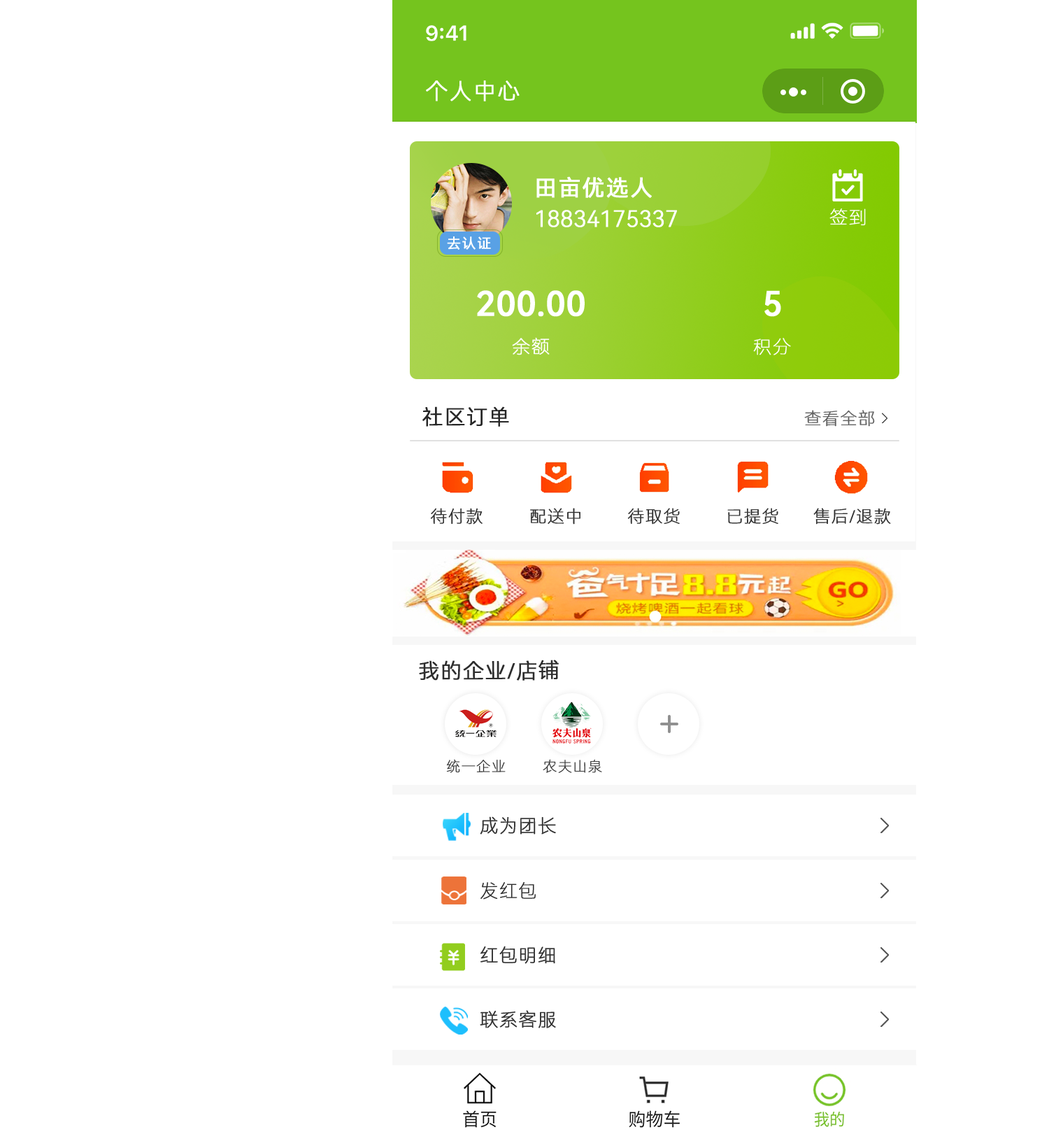
<style>
.page{position:relative;width:1049px;height:1136px;background:#ffffff}
.page>*{position:absolute;margin:0}
.t1{font:22.4px "HarmonyOS_Sans_SC_Light";letter-spacing:0.04em;color:#ffffff;text-transform:uppercase;font-weight:bold}
.t2{font:22.3px "HarmonyOS_Sans_SC";letter-spacing:0.04em;color:#ffffff;text-transform:uppercase;font-weight:bold}
.t3{font:22.3px "HarmonyOS_Sans_Light";color:#ffffff;text-transform:uppercase;font-weight:bold}
.t4{font:18.2px "HarmonyOS_Sans_SC_Thin";letter-spacing:0.04em;color:#ffffff;text-transform:uppercase;font-weight:bold}
.t5{font:14px "HarmonyOS_Sans_SC";letter-spacing:0.04em;color:#ffffff;text-transform:uppercase;font-weight:bold}
.t6{font:33.6px "HarmonyOS_Sans_Medium";color:#ffffff;text-transform:uppercase;font-weight:bold}
.t7{font:21px "HarmonyOS_Sans_SC_Light";letter-spacing:0.025em;color:#272727;text-transform:uppercase;font-weight:bold}
.t8{font:16.8px "HarmonyOS_Sans_SC_Thin";letter-spacing:0.025em;color:#5f5f5f;text-transform:uppercase;font-weight:bold}
.t9{font:16.8px "HarmonyOS_Sans_SC_Thin";letter-spacing:0.025em;color:#2d2d2d;text-transform:uppercase;font-weight:bold}
.t10{font:21px "HarmonyOS_Sans_SC_Light";letter-spacing:0.025em;color:#2d2d2d;text-transform:uppercase;font-weight:bold}
.t11{font:14px "HarmonyOS_Sans_SC_Thin";letter-spacing:0.025em;color:#2d2d2d;text-transform:uppercase;font-weight:bold}
.t12{font:18.2px "HarmonyOS_Sans_SC_Thin";letter-spacing:0.025em;color:#2d2d2d;text-transform:uppercase;font-weight:bold}
</style>
<div class="page">
<p class="t1" style="left:426px;top:80px;width:94px;height:21px">个人中心</p>
<p class="t2" style="left:537px;top:176px;width:115px;height:22px">田亩优选人</p>
<p class="t3" style="left:536px;top:210px;width:142px;height:17px">18834175337</p>
<p class="t4" style="left:830px;top:208px;width:36px;height:18px">签到</p>
<p class="t5" style="left:447px;top:236px;width:44px;height:14px">去认证</p>
<p class="t6" style="left:477px;top:290px;width:108px;height:27px">200.00</p>
<p class="t6" style="left:765px;top:290px;width:17px;height:27px">5</p>
<p class="t4" style="left:512px;top:337px;width:38px;height:18px">余额</p>
<p class="t4" style="left:754px;top:338px;width:37px;height:17px">积分</p>
<p class="t7" style="left:423px;top:406px;width:86px;height:21px">社区订单</p>
<p class="t8" style="left:805px;top:410px;width:70px;height:17px">查看全部</p>
<p class="t9" style="left:430px;top:508px;width:53px;height:17px">待付款</p>
<p class="t9" style="left:530px;top:508px;width:51px;height:17px">配送中</p>
<p class="t9" style="left:628px;top:508px;width:52px;height:17px">待取货</p>
<p class="t9" style="left:728px;top:508px;width:51px;height:16px">已提货</p>
<p class="t9" style="left:814px;top:508px;width:77px;height:17px">售后/退款</p>
<p class="t10" style="left:419px;top:660px;width:140px;height:21px">我的企业/店铺</p>
<p class="t11" style="left:446px;top:759px;width:60px;height:14px">统一企业</p>
<p class="t11" style="left:543px;top:759px;width:59px;height:14px">农夫山泉</p>
<p class="t12" style="left:480px;top:816px;width:76px;height:19px">成为团长</p>
<p class="t12" style="left:481px;top:882px;width:56px;height:18px">发红包</p>
<p class="t12" style="left:481px;top:946px;width:75px;height:18px">红包明细</p>
<p class="t12" style="left:480px;top:1010px;width:76px;height:18px">联系客服</p>
</div>
